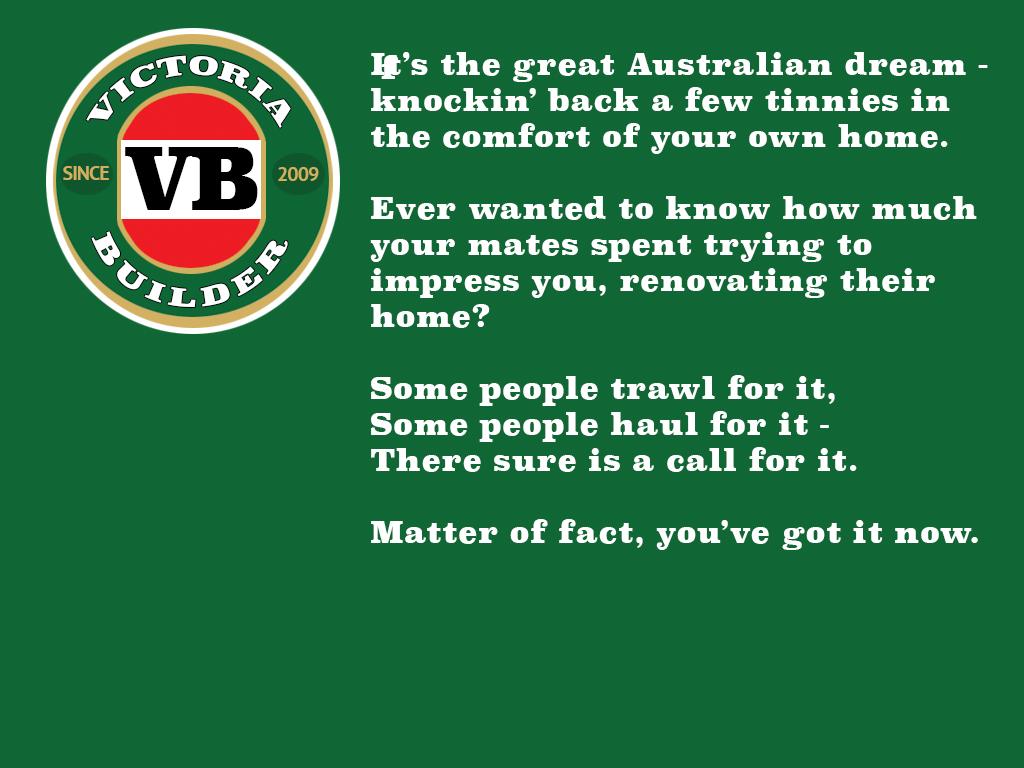
<style>
.page{position:relative;width:1024px;height:768px;background:#106735}
.page>*{position:absolute;margin:0}
.t1{font:30px "Superclarendon-Black";letter-spacing:0.015em;color:#ffffff}
.t2{font:25px "Superclarendon-Black";letter-spacing:0.015em;color:#ffffff}
.t3{font:85px "Superclarendon-Black";letter-spacing:-0.1em;color:#000000}
.t4{font:20px "PTSans-Bold";letter-spacing:-0.05em;color:#d1af5f}
.t5{font:25px "Superclarendon-Black";letter-spacing:0.1em;color:#ffffff}
</style>
<div class="page">
<p class="t1" style="left:370px;top:52px;width:618px;height:498px">It’s the great Australian dream -<br>knockin’ back a few tinnies in<br>the comfort of your own home.<br><br>Ever wanted to know how much<br>your mates spent trying to<br>impress you, renovating their<br>home?<br><br>Some people trawl for it,<br>Some people haul for it -<br>There sure is a call for it.<br><br>Matter of fact, you’ve got it now.</p>
<p class="t2" style="left:86px;top:55px;width:205px;height:73px">VICTORIA</p>
<p class="t1" style="left:381px;top:55px;width:17px;height:24px">f</p>
<p class="t3" style="left:125px;top:147px;width:133px;height:63px">VB</p>
<p class="t4" style="left:63px;top:166px;width:46px;height:14px">SINCE</p>
<p class="t4" style="left:278px;top:167px;width:41px;height:14px">2009</p>
<p class="t5" style="left:91px;top:231px;width:197px;height:76px">BUILDER</p>
</div>
